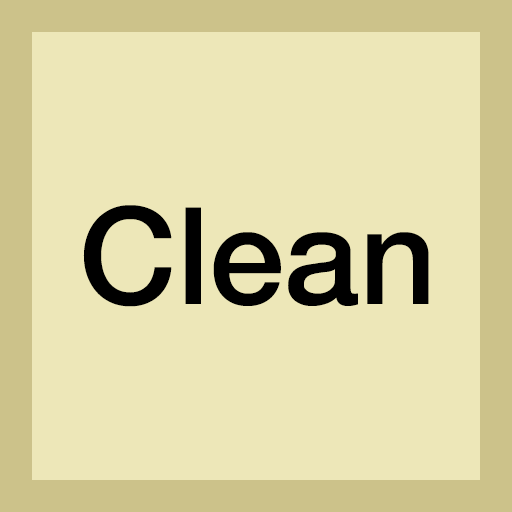
<style>
.page{position:relative;width:512px;height:512px;background:#ede7b8}
.page>*{position:absolute;margin:0}
.t1{font:135px "HelveticaNeue-Medium";color:#000000}
</style>
<div class="page">
<p class="t1" style="left:83px;top:205px;width:346px;height:102px">Clean</p>
</div>
